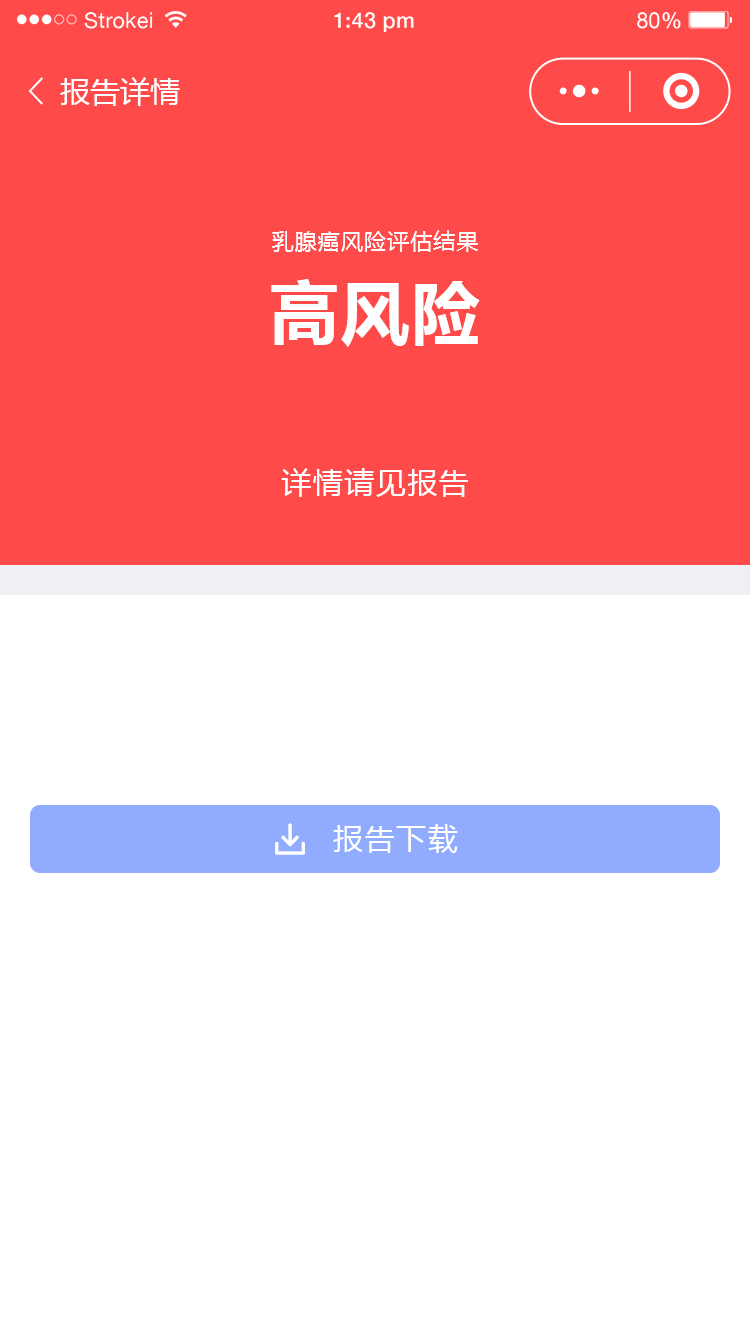
<style>
.page{position:relative;width:750px;height:1334px;background:#ffffff}
.page>*{position:absolute;margin:0}
.t1{font:30px "MicrosoftYaHei";color:#ffffff}
.t2{font:22px/88px "MicrosoftYaHei";letter-spacing:0.05em;color:#ffffff}
.t3{font:68px/88px "MicrosoftYaHei-Bold";letter-spacing:0.05em;color:#ffffff}
.t4{font:30px "MicrosoftYaHei";letter-spacing:0.05em;color:#ffffff}
</style>
<div class="page">
<p class="t1" style="left:60px;top:77px;width:120px;height:29px">报告详情</p>
<p class="t2" style="left:271px;top:230px;width:209px;height:117px;text-align:center">乳腺癌风险评估结果<br><span class="t3">高风险</span></p>
<p class="t4" style="left:281px;top:468px;width:187px;height:29px">详情请见报告</p>
<p class="t4" style="left:333px;top:824px;width:125px;height:29px">报告下载</p>
</div>
